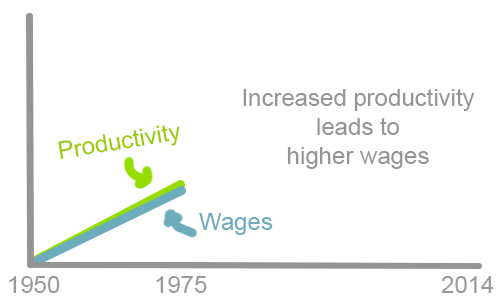
<style>
.page{position:relative;width:500px;height:300px;background:#ffffff}
.page>*{position:absolute;margin:0}
.t1{font:24px "ArialMT";color:#959595}
.t2{font:24px "ArialMT";color:#99cc00}
.t3{font:24px "ArialMT";color:#6cacbb}
.t4{font:24px "ArialMT";color:#999999}
</style>
<div class="page">
<p class="t1" style="left:243px;top:88px;width:232px;height:81px;text-align:center">Increased productivity<br>leads to<br>higher wages</p>
<p class="t2" style="left:58px;top:124px;width:122px;height:35px;rotate:-9deg">Productivity</p>
<p class="t3" style="left:199px;top:213px;width:74px;height:22px">Wages</p>
<p class="t4" style="left:9px;top:276px;width:51px;height:17px">1950</p>
<p class="t4" style="left:156px;top:276px;width:51px;height:17px">1975</p>
<p class="t4" style="left:441px;top:276px;width:53px;height:17px">2014</p>
</div>
